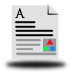
<style>
.page{position:relative;width:72px;height:72px;background:#ffffff}
.page>*{position:absolute;margin:0}
.t1{font:12.5px "TrajanPro-Regular";color:#070707}
</style>
<div class="page">
<p class="t1" style="left:15px;top:8px;width:10px;height:10px">A</p>
</div>
